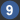
<style>
.page{position:relative;width:20px;height:20px;background:#3b5f97}
.page>*{position:absolute;margin:0}
.t1{font:14px "Arial-BoldMT";letter-spacing:0.025em;color:#fcfdfd}
</style>
<div class="page">
<p class="t1" style="left:6px;top:5px;width:7px;height:11px">9</p>
</div>
